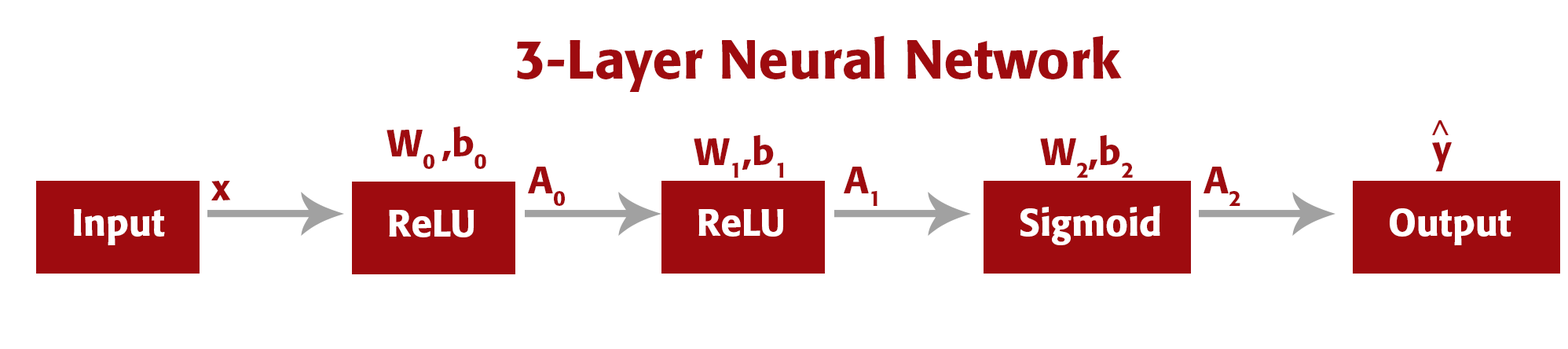
<style>
.page{position:relative;width:1568px;height:349px;background:#ffffff}
.page>*{position:absolute;margin:0}
.t1{font:54.2px "Formata-Medium";color:#9e0b0f}
.t2{font:37.7px "Formata-Medium";color:#9e0b0f}
.t3{font:22.5px "Formata-Medium";color:#9e0b0f}
.t4{font:37.7px "Formata-Medium";color:#ffffff}
</style>
<div class="page">
<p class="t1" style="left:517px;top:35px;width:605px;height:57px">3-Layer Neural Network</p>
<p class="t2" style="left:387px;top:126px;width:99px;height:43px">W0 ,b0</p>
<p class="t3" style="left:1432px;top:120px;width:17px;height:15px;rotate:90deg">&lt;</p>
<p class="t2" style="left:694px;top:134px;width:90px;height:44px">W1,b1</p>
<p class="t2" style="left:1040px;top:134px;width:93px;height:44px">W2,b2</p>
<p class="t2" style="left:1432px;top:142px;width:20px;height:29px">y</p>
<p class="t2" style="left:528px;top:167px;width:37px;height:39px">A0</p>
<p class="t2" style="left:844px;top:167px;width:33px;height:39px">A1</p>
<p class="t2" style="left:1203px;top:167px;width:37px;height:39px">A2</p>
<p class="t2" style="left:211px;top:181px;width:20px;height:19px">x</p>
<p class="t4" style="left:74px;top:209px;width:91px;height:37px">Input</p>
<p class="t4" style="left:389px;top:210px;width:85px;height:27px">ReLU</p>
<p class="t4" style="left:698px;top:209px;width:86px;height:27px">ReLU</p>
<p class="t4" style="left:1020px;top:205px;width:140px;height:40px">Sigmoid</p>
<p class="t4" style="left:1390px;top:208px;width:121px;height:38px">Output</p>
</div>
